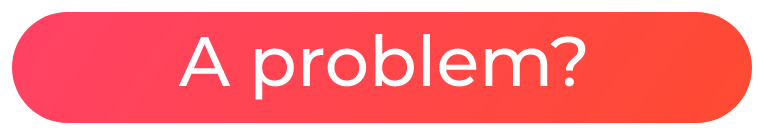
<style>
.page{position:relative;width:764px;height:135px;background:#ffffff}
.page>*{position:absolute;margin:0}
.t1{font:70px "Montserrat-Medium";color:#ffffff}
</style>
<div class="page">
<p class="t1" style="left:178px;top:34px;width:408px;height:66px">A problem?</p>
</div>
